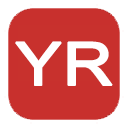
<style>
.page{position:relative;width:128px;height:128px;background:#c8302d}
.page>*{position:absolute;margin:0}
.t1{font:59.4px "ArialMT";color:#ffffff;font-weight:bold;scale:1.15 1}
</style>
<div class="page">
<p class="t1" style="left:15px;top:41px;width:98px;height:45px">YR</p>
</div>
